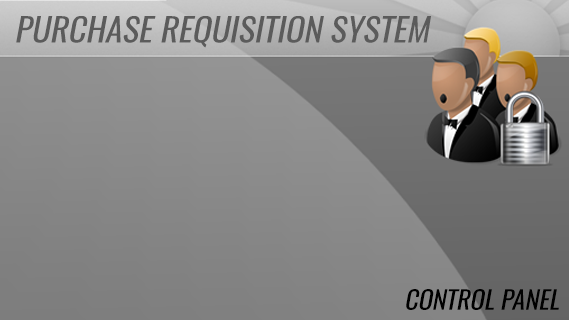
<style>
.page{position:relative;width:569px;height:320px}
.page>*{position:absolute;margin:0}
.t1{font:32.5px "Oswald-Regular";color:#5b5b5b;text-transform:uppercase;font-style:italic;scale:1.06 1}
.t2{font:25px "Oswald-Regular";color:#000000;text-transform:uppercase;font-style:italic;scale:1.04 1}
</style>
<div class="page">
<p class="t1" style="left:16px;top:16px;width:415px;height:32px">purchase requisition system</p>
<p class="t2" style="left:406px;top:289px;width:153px;height:21px">control panel</p>
</div>
